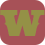
<style>
.page{position:relative;width:45px;height:45px;background:#a75157}
.page>*{position:absolute;margin:0}
.t1{font:50px "Saddlebag-Black";color:#949146}
</style>
<div class="page">
<p class="t1" style="left:0px;top:10px;width:45px;height:26px">W</p>
</div>
